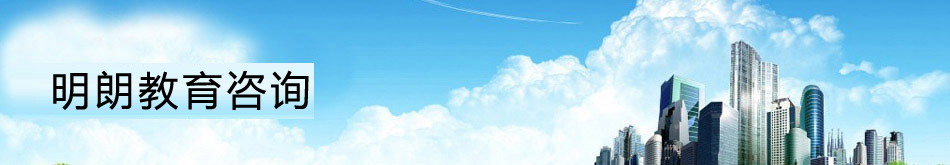
<style>
.page{position:relative;width:950px;height:165px}
.page>*{position:absolute;margin:0}
.t1{font:40px "MicrosoftYaHei";letter-spacing:0.1em;color:#000000}
</style>
<div class="page">
<p class="t1" style="left:53px;top:70px;width:256px;height:40px">明朗教育咨询</p>
</div>
